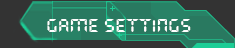
<style>
.page{position:relative;width:235px;height:48px;background:#297960}
.page>*{position:absolute;margin:0}
.t1{font:18.4px "QuartzMS";color:#ffffff}
</style>
<div class="page">
<p class="t1" style="left:47px;top:19px;width:144px;height:13px">GAME SETTINGS</p>
</div>
